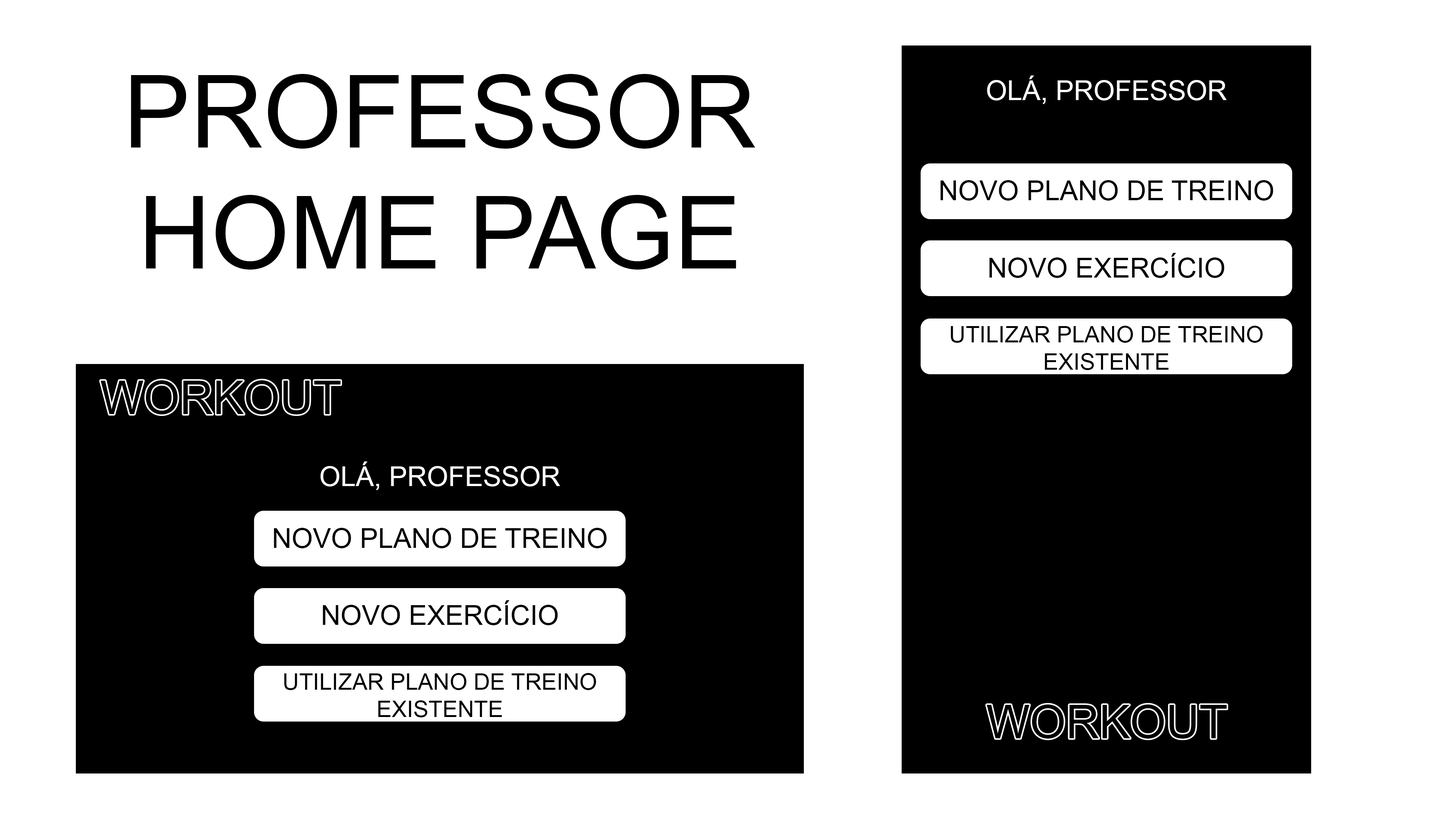
<style>
.page{position:relative;width:1456px;height:819px;background:#ffffff}
.page>*{position:absolute;margin:0}
.t1{font:100.9px "ArialMT";color:#000000}
.t2{font:27.3px "ArialMT";color:#ffffff}
.t3{font:27.3px "ArialMT";color:#000000}
.t4{font:22.7px "ArialMT";color:#000000}
</style>
<div class="page">
<p class="t1" style="left:131px;top:74px;width:624px;height:196px;text-align:center">PROFESSOR HOME PAGE</p>
<p class="t2" style="left:987px;top:75px;width:240px;height:29px">OLÁ, PROFESSOR</p>
<p class="t3" style="left:940px;top:180px;width:333px;height:21px">NOVO PLANO DE TREINO</p>
<p class="t3" style="left:989px;top:253px;width:235px;height:25px">NOVO EXERCÍCIO</p>
<p class="t4" style="left:951px;top:326px;width:312px;height:44px;text-align:center">UTILIZAR PLANO DE TREINO<br>EXISTENTE</p>
<p class="t2" style="left:320px;top:461px;width:240px;height:29px">OLÁ, PROFESSOR</p>
<p class="t3" style="left:274px;top:528px;width:333px;height:20px">NOVO PLANO DE TREINO</p>
<p class="t3" style="left:323px;top:600px;width:235px;height:25px">NOVO EXERCÍCIO</p>
<p class="t4" style="left:284px;top:673px;width:312px;height:44px;text-align:center">UTILIZAR PLANO DE TREINO<br>EXISTENTE</p>
</div>
